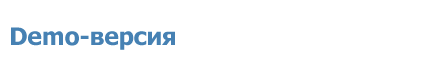
<style>
.page{position:relative;width:437px;height:75px;background:#ffffff}
.page>*{position:absolute;margin:0}
.t1{font:24px "Tahoma-Bold";color:#4682b4}
</style>
<div class="page">
<p class="t1" style="left:11px;top:27px;width:164px;height:23px">Demo-версия</p>
</div>
